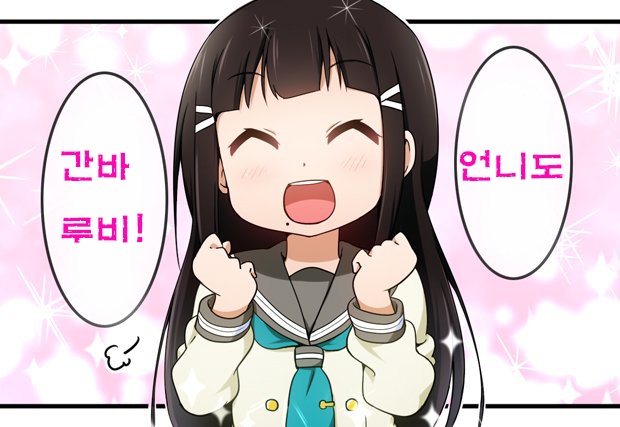
<style>
.page{position:relative;width:620px;height:427px}
.page>*{position:absolute;margin:0}
.t1{font:36px "H2mkpB";color:#fc07b2}
</style>
<div class="page">
<p class="t1" style="left:61px;top:150px;width:82px;height:93px">간바<br>루비!</p>
<p class="t1" style="left:459px;top:150px;width:104px;height:31px">언니도</p>
</div>
